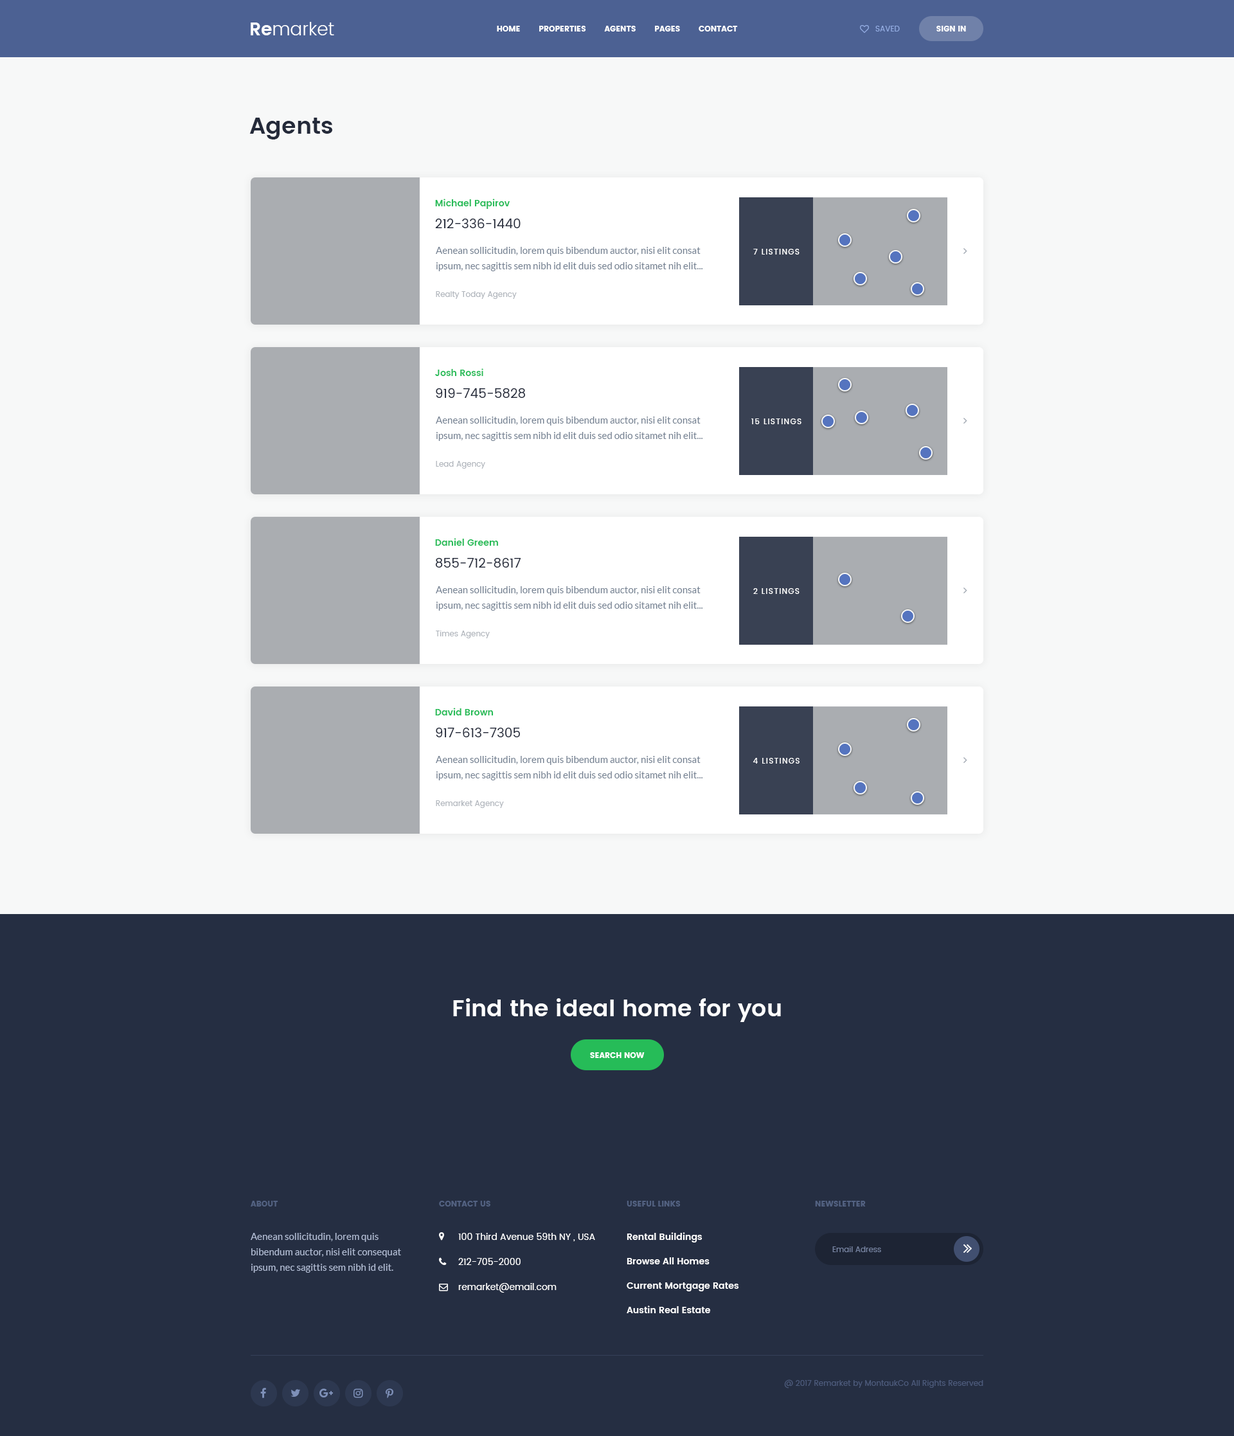
<style>
.page{position:relative;width:1234px;height:1436px;background:#252e42}
.page>*{position:absolute;margin:0}
.t1{font:18px "Poppins-Light";color:#ffffff}
.t2{font:18px "Poppins-SemiBold";color:#ffffff}
.t3{font:7.7px "Poppins";color:#ffffff;text-transform:uppercase}
.t4{font:7.7px "Poppins-Regular";color:#93ace2;text-transform:uppercase}
.t5{font:23.1px "Poppins-SemiBold";color:#242a3a}
.t6{font:9px "Poppins-SemiBold";color:#26bc58}
.t7{font:12.9px "Poppins-Regular";color:#242a3a}
.t8{font:9.6px/15.4px "Lato-Regular";color:#727f90}
.t9{font:7.7px "Poppins-Medium";letter-spacing:0.1em;color:#ffffff;text-transform:uppercase}
.t10{font:7.7px "Poppins-Regular";color:#afb4bb}
.t11{font:23.1px "Poppins-SemiBold";color:#ffffff}
.t12{font:7.7px "Poppins";color:#536282;text-transform:uppercase}
.t13{font:9.6px/15.4px "Lato-Regular";color:#b2bdd5}
.t14{font:9px "Poppins-Regular";color:#ffffff}
.t15{font:9px/24.4px "Poppins-SemiBold";color:#ffffff}
.t16{font:7.7px "Poppins-Regular";color:#7784a2}
.t17{font:7.7px "Poppins-Regular";color:#4d5b7c}
</style>
<div class="page">
<p class="t1" style="left:251px;top:22px;width:83px;height:13px"><span class="t2">Re</span>market</p>
<p class="t3" style="left:497px;top:26px;width:241px;height:6px">Home        Properties        Agents        Pages        Contact</p>
<p class="t4" style="left:876px;top:26px;width:24px;height:6px">Saved</p>
<p class="t3" style="left:937px;top:26px;width:29px;height:6px">Sign In</p>
<p class="t5" style="left:249px;top:118px;width:83px;height:22px">Agents</p>
<p class="t6" style="left:435px;top:199px;width:75px;height:10px">Michael Papirov</p>
<p class="t7" style="left:435px;top:219px;width:86px;height:9px">212-336-1440</p>
<p class="t8" style="left:436px;top:247px;width:267px;height:24px">Aenean sollicitudin, lorem quis bibendum auctor, nisi elit consat ipsum, nec sagittis sem nibh id elit duis sed odio sitamet nih elit...</p>
<p class="t9" style="left:753px;top:249px;width:47px;height:6px">7 Listings</p>
<p class="t10" style="left:436px;top:291px;width:81px;height:8px">Realty Today Agency</p>
<p class="t6" style="left:435px;top:368px;width:48px;height:8px">Josh Rossi</p>
<p class="t7" style="left:436px;top:388px;width:89px;height:10px">919-745-5828</p>
<p class="t8" style="left:436px;top:417px;width:267px;height:24px">Aenean sollicitudin, lorem quis bibendum auctor, nisi elit consat ipsum, nec sagittis sem nibh id elit duis sed odio sitamet nih elit...</p>
<p class="t9" style="left:752px;top:419px;width:50px;height:5px">15 Listings</p>
<p class="t10" style="left:436px;top:461px;width:49px;height:8px">Lead Agency</p>
<p class="t6" style="left:435px;top:538px;width:63px;height:8px">Daniel Greem</p>
<p class="t7" style="left:435px;top:558px;width:86px;height:10px">855-712-8617</p>
<p class="t8" style="left:436px;top:586px;width:267px;height:25px">Aenean sollicitudin, lorem quis bibendum auctor, nisi elit consat ipsum, nec sagittis sem nibh id elit duis sed odio sitamet nih elit...</p>
<p class="t9" style="left:753px;top:588px;width:47px;height:6px">2 Listings</p>
<p class="t10" style="left:436px;top:631px;width:54px;height:7px">Times Agency</p>
<p class="t6" style="left:435px;top:708px;width:59px;height:8px">David Brown</p>
<p class="t7" style="left:436px;top:728px;width:84px;height:9px">917-613-7305</p>
<p class="t8" style="left:436px;top:756px;width:267px;height:24px">Aenean sollicitudin, lorem quis bibendum auctor, nisi elit consat ipsum, nec sagittis sem nibh id elit duis sed odio sitamet nih elit...</p>
<p class="t9" style="left:753px;top:758px;width:47px;height:6px">4 Listings</p>
<p class="t10" style="left:436px;top:800px;width:68px;height:8px">Remarket Agency</p>
<p class="t11" style="left:453px;top:998px;width:328px;height:24px">Find the ideal home for you</p>
<p class="t3" style="left:590px;top:1052px;width:55px;height:6px">Search Now</p>
<p class="t12" style="left:251px;top:1201px;width:27px;height:6px">About</p>
<p class="t12" style="left:439px;top:1201px;width:52px;height:6px">Contact Us</p>
<p class="t12" style="left:627px;top:1201px;width:54px;height:6px">Useful Links</p>
<p class="t12" style="left:815px;top:1201px;width:51px;height:6px">Newsletter</p>
<p class="t13" style="left:251px;top:1233px;width:150px;height:40px">Aenean sollicitudin, lorem quis bibendum auctor, nisi elit consequat ipsum, nec sagittis sem nibh id elit.</p>
<p class="t14" style="left:458px;top:1233px;width:137px;height:8px">100 Third Avenue 59th NY , USA</p>
<p class="t15" style="left:627px;top:1232px;width:112px;height:81px">Rental Buildings<br>Browse All Homes<br>Current Mortgage Rates<br>Austin Real Estate</p>
<p class="t16" style="left:833px;top:1246px;width:48px;height:6px">Email Adress</p>
<p class="t14" style="left:458px;top:1258px;width:63px;height:7px">212-705-2000</p>
<p class="t14" style="left:458px;top:1283px;width:99px;height:10px">remarket@email.com</p>
<p class="t17" style="left:784px;top:1380px;width:200px;height:9px">@ 2017 Remarket by MontaukCo All Rights Reserved</p>
</div>
